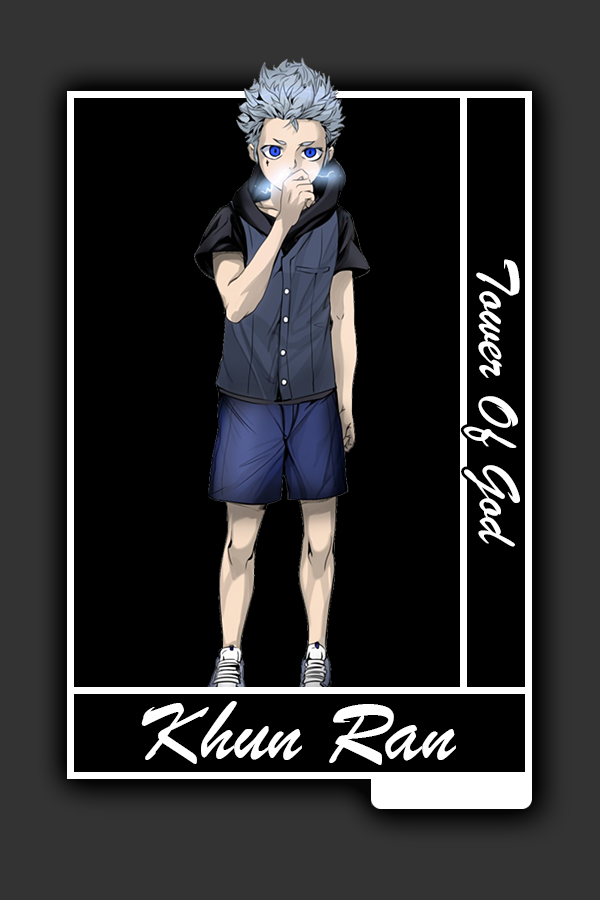
<style>
.page{position:relative;width:600px;height:900px;background:#000000}
.page>*{position:absolute;margin:0}
.t1{font:61.5px "BrushScriptMT";color:#ffffff}
.t2{font:89.7px "BrushScriptMT";color:#ffffff}
</style>
<div class="page">
<p class="t1" style="left:463px;top:259px;width:57px;height:288px;rotate:90deg">Tower Of God</p>
<p class="t2" style="left:141px;top:701px;width:315px;height:64px">Khun Ran</p>
</div>
